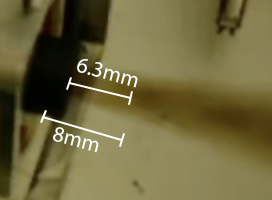
<style>
.page{position:relative;width:272px;height:200px}
.page>*{position:absolute;margin:0}
.t1{font:22px "MyriadPro-Regular";color:#ffffff}
</style>
<div class="page">
<p class="t1" style="left:77px;top:59px;width:61px;height:29px;rotate:15deg">6.3mm</p>
<p class="t1" style="left:53px;top:127px;width:46px;height:26px;rotate:15deg">8mm</p>
</div>
